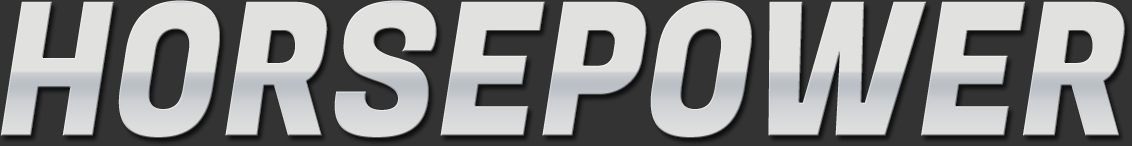
<style>
.page{position:relative;width:1132px;height:146px;background:#333333}
.page>*{position:absolute;margin:0}
.t1{font:185.2px "FugazOne-Regular";color:#dfdfdf;scale:0.89 1}
</style>
<div class="page">
<p class="t1" style="left:0px;top:0px;width:1125px;height:138px">HORSEPOWER</p>
</div>
